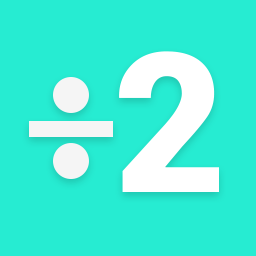
<style>
.page{position:relative;width:256px;height:256px;background:#26ecd2}
.page>*{position:absolute;margin:0}
.t1{font:194.7px "Roboto-Black";letter-spacing:0.18em;color:#ffffff;text-transform:uppercase}
</style>
<div class="page">
<p class="t1" style="left:119px;top:51px;width:100px;height:141px">2</p>
</div>
